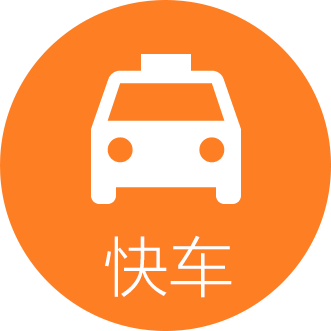
<style>
.page{position:relative;width:331px;height:331px;background:#fd7e23}
.page>*{position:absolute;margin:0}
.t1{font:65px "FZLTXHK--GBK1-0";color:#ffffff}
</style>
<div class="page">
<p class="t1" style="left:105px;top:235px;width:127px;height:63px">快车</p>
</div>
